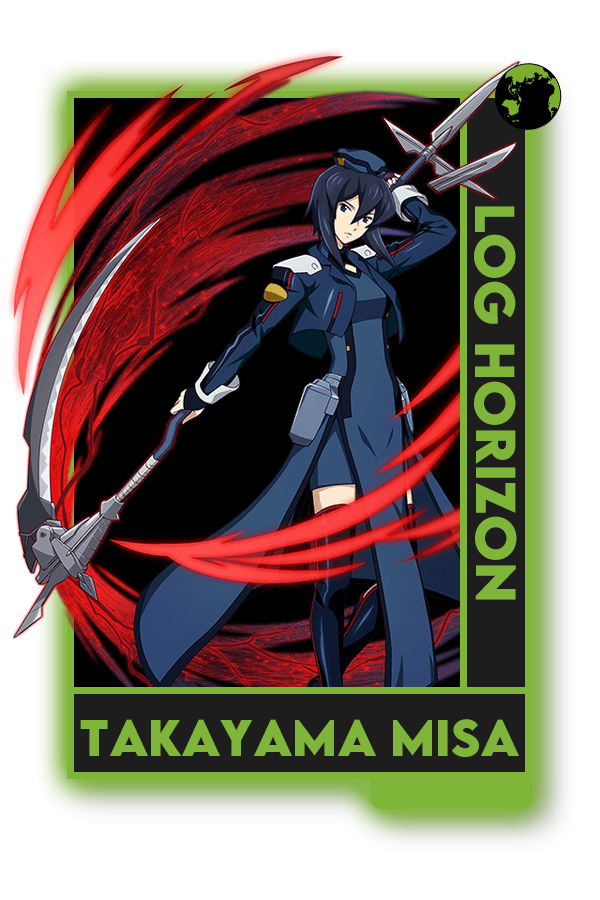
<style>
.page{position:relative;width:600px;height:900px}
.page>*{position:absolute;margin:0}
.t1{font:50px "LEMONMILK-Bold";color:#7fad41}
.t2{font:45.8px "LEMONMILK-Bold";color:#7fad41}
</style>
<div class="page">
<p class="t1" style="left:474px;top:206px;width:43px;height:394px;rotate:90deg">Log Horizon</p>
<p class="t2" style="left:80px;top:719px;width:439px;height:38px">Takayama Misa</p>
</div>
